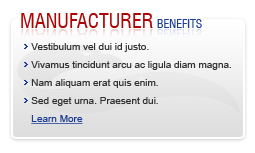
<style>
.page{position:relative;width:255px;height:153px;background:#ffffff}
.page>*{position:absolute;margin:0}
.t1{font:20px "Swiss721BT-RomanCondensed";color:#ad0505;text-transform:uppercase}
.t2{font:12px "Swiss721BT-RomanCondensed";color:#1c3f95;text-transform:uppercase}
.t3{font:20px "Swiss721BT-RomanCondensed";color:#faf8f8;text-transform:uppercase}
.t4{font:12px "Swiss721BT-RomanCondensed";color:#faf8f8;text-transform:uppercase}
.t5{font:10px/18px "ArialMT";color:#333333}
.t6{font:10px/18px "ArialMT";color:#1c3f95;text-decoration:underline}
</style>
<div class="page">
<p class="t1" style="left:21px;top:13px;width:181px;height:15px">Manufacturer <span class="t2">benefits</span></p>
<p class="t3" style="left:21px;top:29px;width:181px;height:15px">Manufacturer <span class="t4">benefits</span></p>
<p class="t5" style="left:31px;top:43px;width:200px;height:81px">Vestibulum vel dui id justo.<br>Vivamus tincidunt arcu ac ligula diam magna.<br>Nam aliquam erat quis enim.<br>Sed eget urna. Praesent dui.<br><span class="t6">Learn More</span></p>
</div>
